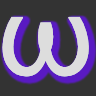
<style>
.page{position:relative;width:96px;height:96px;background:#333333}
.page>*{position:absolute;margin:0}
.t1{font:108.3px "LucidaGrande";color:#dddddd}
</style>
<div class="page">
<p class="t1" style="left:2px;top:16px;width:87px;height:61px">ω</p>
</div>
